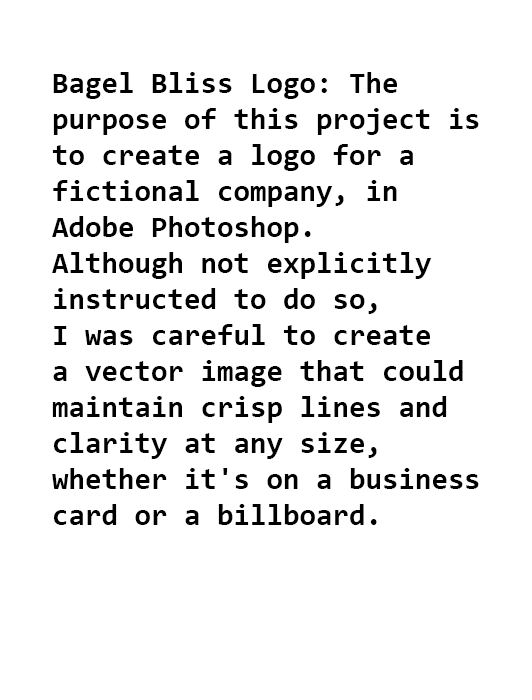
<style>
.page{position:relative;width:532px;height:700px;background:#ffffff}
.page>*{position:absolute;margin:0}
.t1{font:30px "Consolas-Bold";color:#000000}
</style>
<div class="page">
<p class="t1" style="left:52px;top:72px;width:427px;height:453px">Bagel Bliss Logo: The <br>purpose of this project is <br>to create a logo for a <br>fictional company, in <br>Adobe Photoshop. <br>Although not explicitly <br>instructed to do so, <br>I was careful to create <br>a vector image that could <br>maintain crisp lines and <br>clarity at any size, <br>whether it's on a business <br>card or a billboard.</p>
</div>
